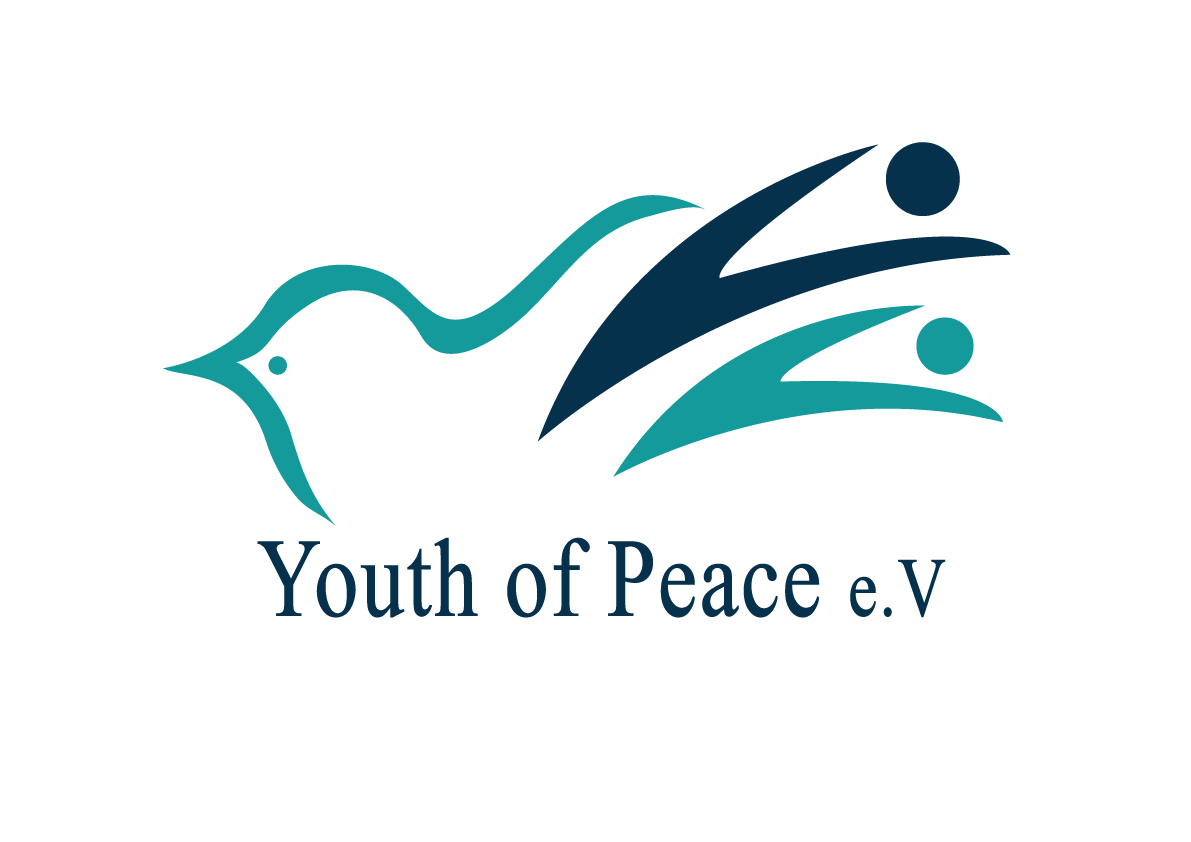
<style>
.page{position:relative;width:1191px;height:842px;background:#ffffff}
.page>*{position:absolute;margin:0}
.t1{font:111.6px "TimesNewRomanPSMT";color:#06314c;font-weight:bold;scale:0.79 1}
.t2{font:83.7px "TimesNewRomanPSMT";color:#06314c;font-weight:bold;scale:0.79 1}
</style>
<div class="page">
<p class="t1" style="left:257px;top:537px;width:689px;height:81px">Youth of Peace <span class="t2">e.V</span></p>
</div>
